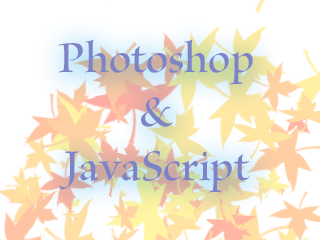
<style>
.page{position:relative;width:320px;height:240px;background:#ffffff}
.page>*{position:absolute;margin:0}
.t1{font:45px "KazurakiSPN-Light";color:#7d83c7}
</style>
<div class="page">
<p class="t1" style="left:58px;top:39px;width:195px;height:154px;text-align:center">Photoshop<br>&amp;<br>JavaScript</p>
</div>
